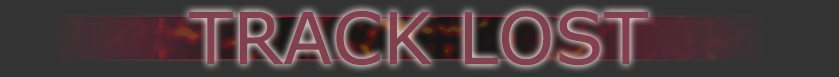
<style>
.page{position:relative;width:839px;height:77px;background:#333333}
.page>*{position:absolute;margin:0}
.t1{font:72px "Verdana";color:#804150}
</style>
<div class="page">
<p class="t1" style="left:188px;top:10px;width:461px;height:56px">TRACK LOST</p>
</div>
